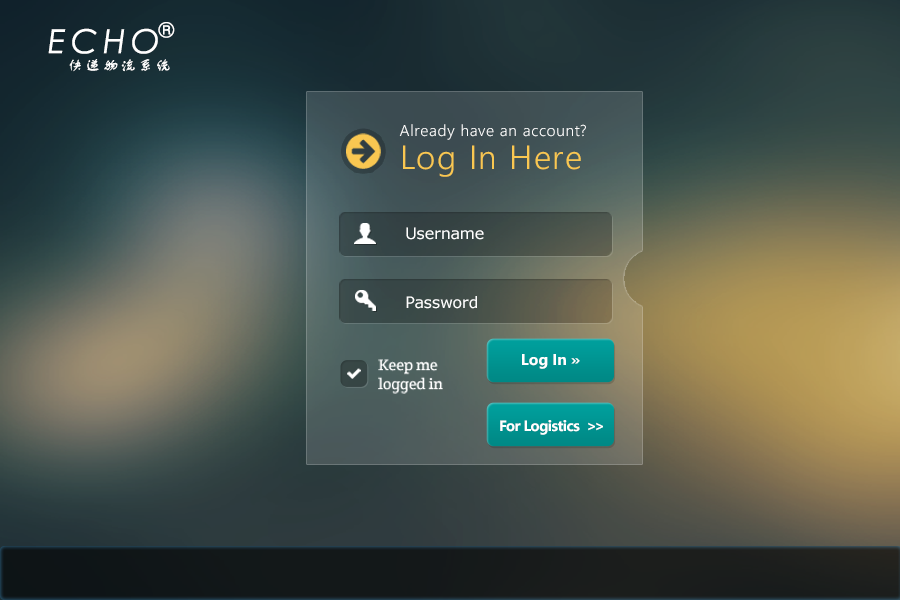
<style>
.page{position:relative;width:900px;height:600px}
.page>*{position:absolute;margin:0}
.t1{font:33px "CenturyGothic-Italic";letter-spacing:0.16em;color:#ffffff;text-transform:uppercase}
.t2{font:20.4px "CenturyGothic-Italic";letter-spacing:0.16em;color:#ffffff;text-transform:uppercase}
.t3{font:15.1px "FZSTK--GBK1-0";letter-spacing:0.16em;color:#ffffff;text-transform:uppercase}
.t4{font:15.6px/33.5px "LeelawadeeUI-Semilight";letter-spacing:0.05em;color:#ffffff}
.t5{font:33.5px/33.5px "LeelawadeeUI-Semilight";letter-spacing:0.05em;color:#f9c751}
.t6{font:15.6px "Verdana";color:#ffffff}
.t7{font:15.6px "CreteRound-Regular";color:#ffffff}
.t8{font:15.6px "LeelawadeeUI-Bold";color:#ffffff}
.t9{font:15px "LeelawadeeUI-Bold";letter-spacing:-0.04em;color:#ffffff}
</style>
<div class="page">
<p class="t1" style="left:48px;top:28px;width:110px;height:26px">ecHO</p>
<p class="t2" style="left:158px;top:22px;width:17px;height:16px">®</p>
<p class="t3" style="left:69px;top:59px;width:101px;height:13px">快递物流系统</p>
<p class="t4" style="left:399px;top:124px;width:187px;height:53px">Already have an account?<br><span class="t5">Log In Here</span></p>
<p class="t6" style="left:406px;top:227px;width:78px;height:13px">Username</p>
<p class="t6" style="left:406px;top:296px;width:71px;height:13px">Password</p>
<p class="t7" style="left:378px;top:359px;width:65px;height:35px">Keep me<br>logged in</p>
<p class="t8" style="left:522px;top:354px;width:58px;height:15px">Log In »</p>
<p class="t9" style="left:500px;top:420px;width:103px;height:15px">For Logistics  &gt;&gt;</p>
</div>
